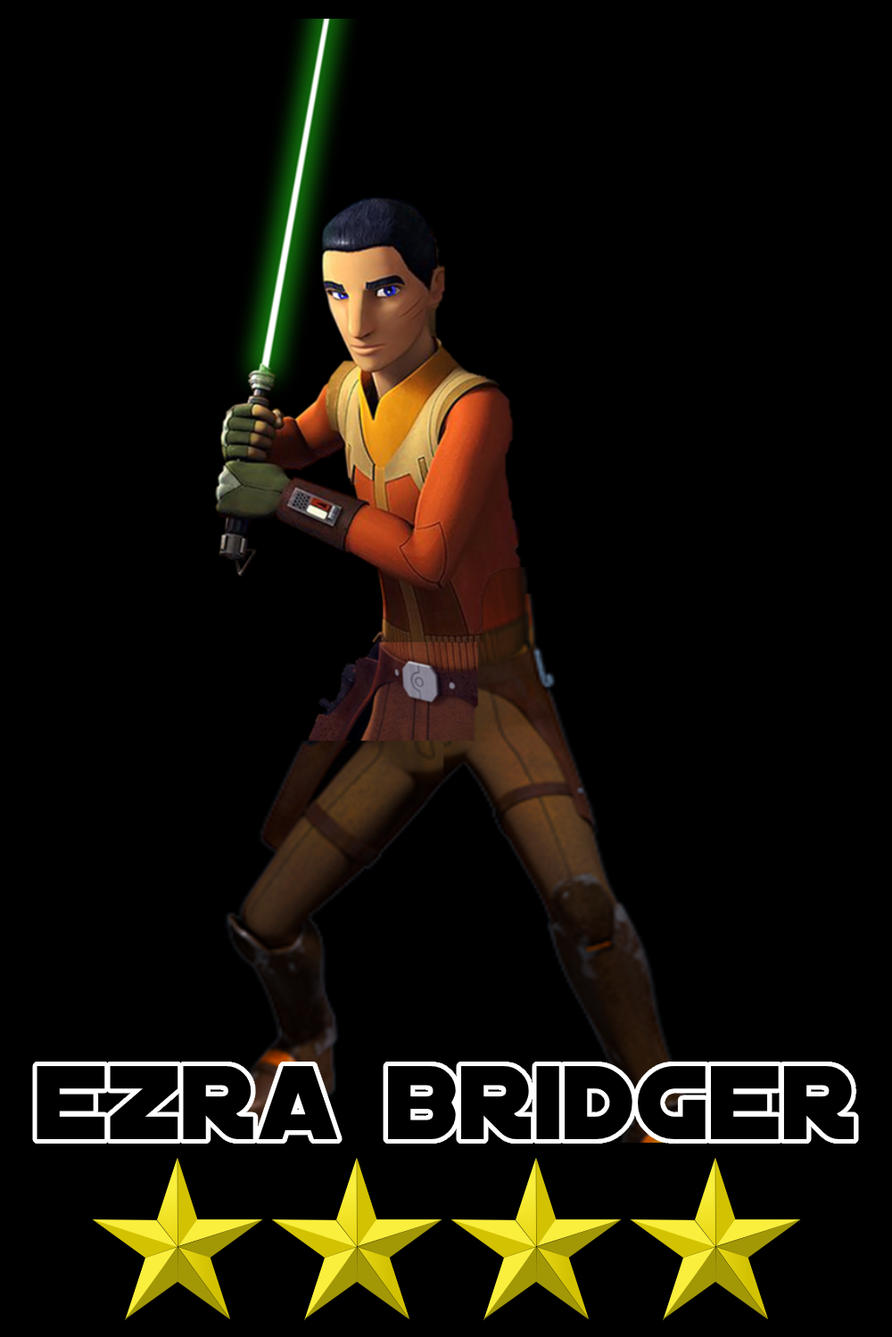
<style>
.page{position:relative;width:892px;height:1337px;background:#000000}
.page>*{position:absolute;margin:0}
.t1{font:112.4px "DistantGalaxy";color:#000000}
</style>
<div class="page">
<p class="t1" style="left:37px;top:1066px;width:817px;height:73px">ezra bridger</p>
</div>
